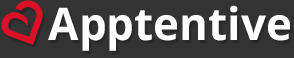
<style>
.page{position:relative;width:294px;height:58px;background:#333333}
.page>*{position:absolute;margin:0}
.t1{font:44.9px "OpenSans-Bold";color:#ffffff}
</style>
<div class="page">
<p class="t1" style="left:48px;top:5px;width:242px;height:46px">Apptentive</p>
</div>
